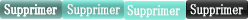
<style>
.page{position:relative;width:248px;height:20px}
.page>*{position:absolute;margin:0}
.t1{font:14.2px "MS-PMincho";color:#ffffff;font-weight:bold;scale:0.84 1}
</style>
<div class="page">
<p class="t1" style="left:4px;top:4px;width:53px;height:13px">Supprimer</p>
<p class="t1" style="left:4px;top:4px;width:53px;height:13px">Supprimer</p>
<p class="t1" style="left:67px;top:4px;width:53px;height:13px">Supprimer</p>
<p class="t1" style="left:127px;top:5px;width:53px;height:13px">Supprimer</p>
<p class="t1" style="left:190px;top:4px;width:53px;height:13px">Supprimer</p>
</div>
